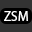
<style>
.page{position:relative;width:32px;height:32px;background:#333333}
.page>*{position:absolute;margin:0}
.t1{font:13.5px "MyriadPro-Regular";color:#ffffff}
</style>
<div class="page">
<p class="t1" style="left:4px;top:11px;width:24px;height:10px">ZSM</p>
</div>
